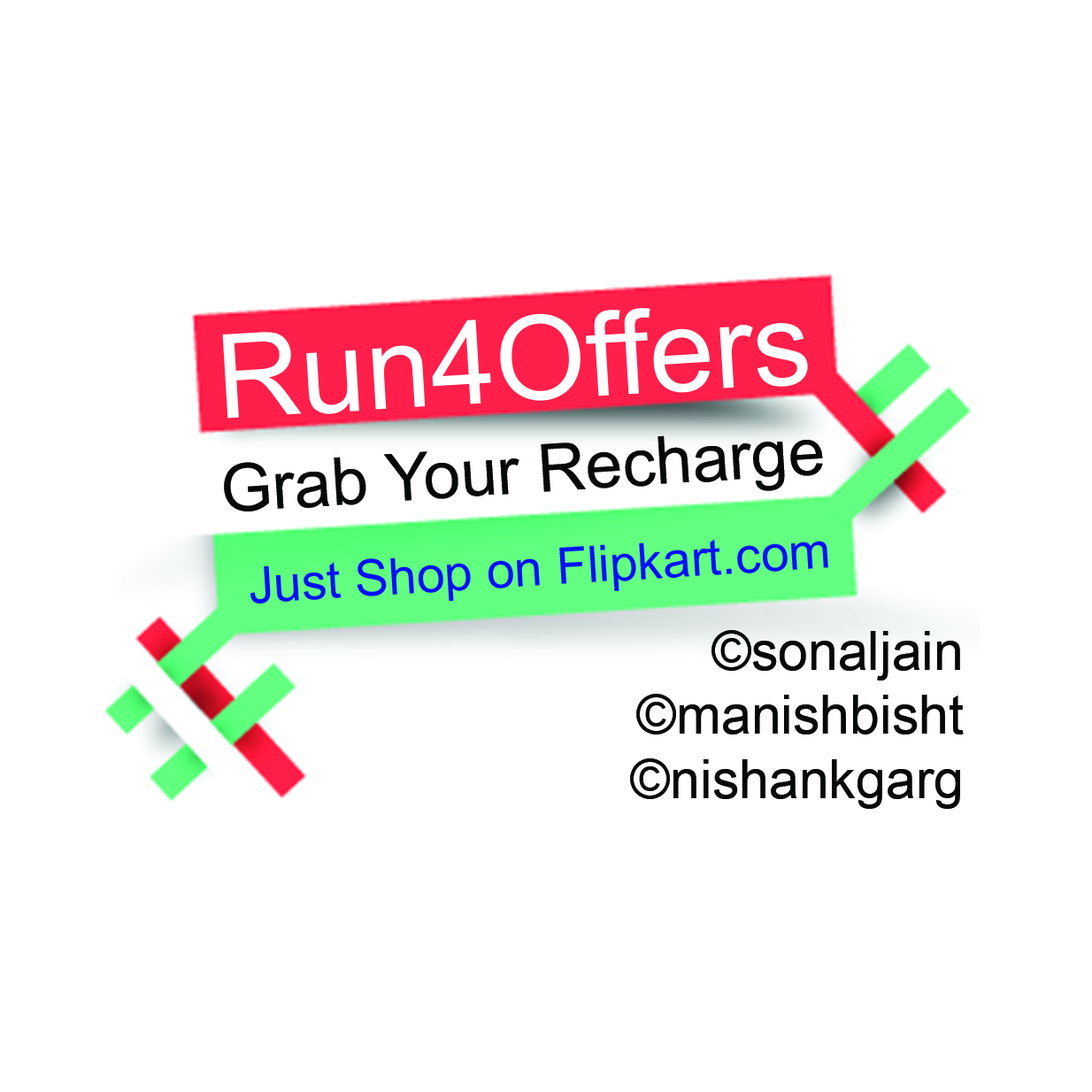
<style>
.page{position:relative;width:1092px;height:1092px;background:#ffffff}
.page>*{position:absolute;margin:0}
.t1{font:116.8px "ArialMT";color:#ffffff}
.t2{font:66.4px "ArialMT";color:#060808}
.t3{font:50.4px "ArialMT";color:#0010f8}
.t4{font:53.8px "ArialMT";color:#060808}
</style>
<div class="page">
<p class="t1" style="left:222px;top:308px;width:586px;height:111px">Run4Offers</p>
<p class="t2" style="left:224px;top:435px;width:599px;height:76px">Grab Your Recharge</p>
<p class="t3" style="left:250px;top:539px;width:578px;height:65px">Just Shop on Flipkart.com</p>
<p class="t4" style="left:630px;top:630px;width:334px;height:179px">sonaljain©<br>manishbisht©<br>nishankgarg©</p>
</div>
